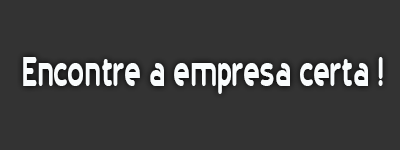
<style>
.page{position:relative;width:400px;height:150px;background:#333333}
.page>*{position:absolute;margin:0}
.t1{font:48.4px "20thCenturyFont";color:#f9fcfd;scale:0.67 1}
</style>
<div class="page">
<p class="t1" style="left:23px;top:57px;width:360px;height:37px">Encontre a empresa certa !</p>
</div>
